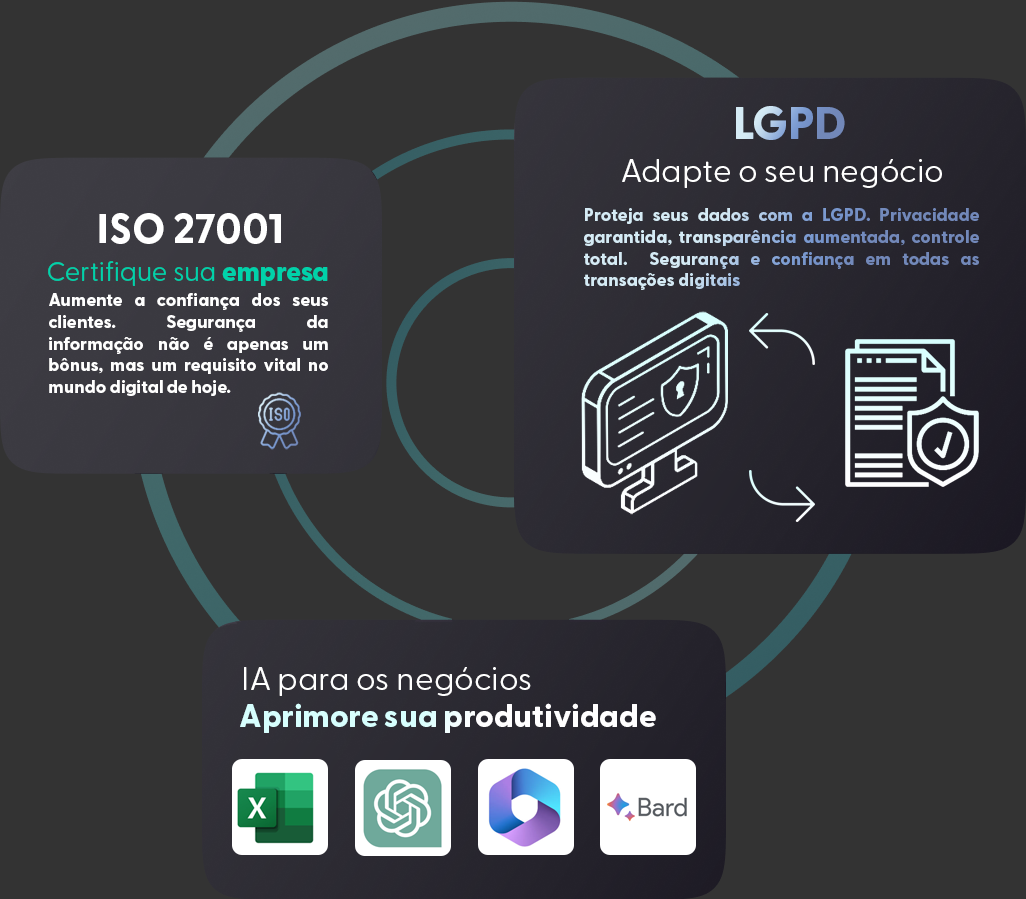
<style>
.page{position:relative;width:1026px;height:899px;background:#333333}
.page>*{position:absolute;margin:0}
.t1{font:46.1px "GreycliffCF-ExtraBold"}
.t2{font:32.6px "GreycliffCF-Regular";color:#ffffff}
.t3{font:18px "GreycliffCF-ExtraBold"}
.t4{font:40.8px "GreycliffCF-ExtraBold";color:#ffffff}
.t5{font:26.8px "GreycliffCF-Regular";color:#00d2aa}
.t6{font:26.8px "GreycliffCF-Heavy";color:#00d2aa}
.t7{font:18px "GreycliffCF-ExtraBold";color:#ffffff}
.t8{font:32px "GreycliffCF-ExtraBold"}
</style>
<div class="page">
<p class="t1" style="left:736px;top:106px;width:109px;height:34px">LGPD</p>
<p class="t2" style="left:622px;top:159px;width:320px;height:29px">Adapte o seu negócio</p>
<p class="t3" style="left:584px;top:208px;width:395px;height:82px;text-align:justify">Proteja seus dados com a LGPD. Privacidade garantida, transparência aumentada, controle total.  Segurança e confiança em todas as transações digitais</p>
<p class="t4" style="left:99px;top:213px;width:182px;height:31px">ISO 27001</p>
<p class="t5" style="left:48px;top:261px;width:280px;height:25px">Certifique sua <span class="t6">empresa</span></p>
<p class="t7" style="left:49px;top:293px;width:279px;height:103px;text-align:justify">Aumente a confiança dos seus clientes. Segurança da informação não é apenas um bônus, mas um requisito vital no mundo digital de hoje.</p>
<p class="t2" style="left:244px;top:667px;width:287px;height:29px">IA para os negócios</p>
<p class="t8" style="left:240px;top:703px;width:416px;height:30px">Aprimore sua produtividade</p>
</div>
